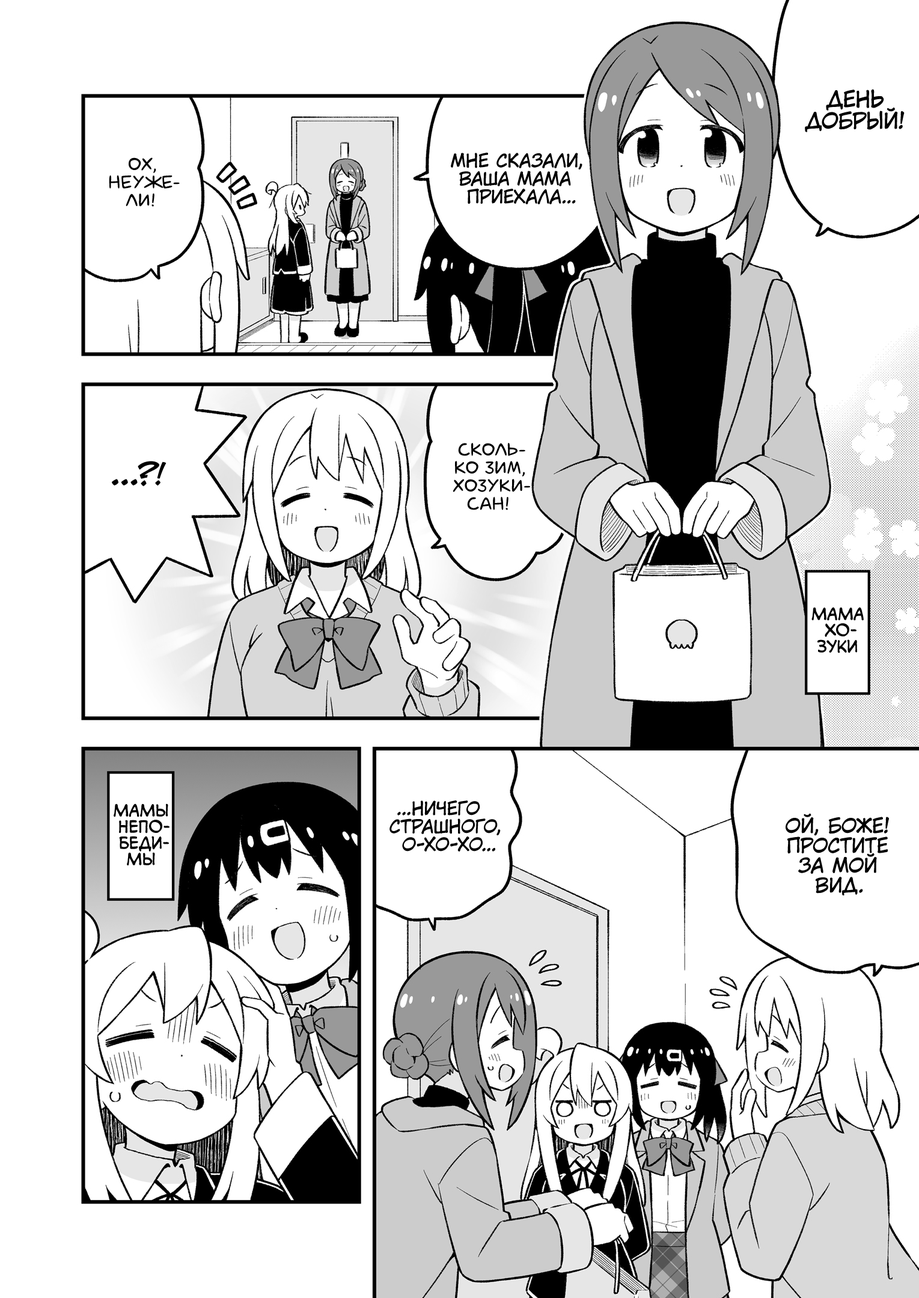
<style>
.page{position:relative;width:919px;height:1298px;background:#ffffff}
.page>*{position:absolute;margin:0}
.t1{font:21.6px "KuraiVoice2";color:#000000;text-transform:uppercase}
.t2{font:18px "laCartoonerie";color:#000000;text-transform:uppercase}
.t3{font:18px "KuraiVoice2";color:#000000;text-transform:uppercase}
.t4{font:28.8px "v_CCJeffCampbell";color:#000000;text-transform:uppercase}
.t5{font:16.2px "v_CCMonologous";color:#000000;text-transform:uppercase}
.t6{font:19.8px "KuraiVoice2";color:#000000;text-transform:uppercase}
</style>
<div class="page">
<p class="t1" style="left:805px;top:89px;width:99px;height:43px;text-align:center">День<br>добрый!</p>
<p class="t2" style="left:109px;top:157px;width:71px;height:50px;text-align:center">Ох,<br>неуже-<br>ли!</p>
<p class="t3" style="left:451px;top:153px;width:131px;height:51px;text-align:center">Мне сказали,<br>ваша мама<br>приехала...</p>
<p class="t2" style="left:452px;top:443px;width:78px;height:67px;text-align:center">Сколь-<br>ко зим,<br>Хозуки-<br>сан!</p>
<p class="t4" style="left:112px;top:461px;width:54px;height:25px">...?!</p>
<p class="t5" style="left:811px;top:607px;width:52px;height:46px;text-align:center">Мама<br>Хо-<br>зуки</p>
<p class="t5" style="left:114px;top:803px;width:55px;height:63px;text-align:center">Мамы<br>непо-<br>беди-<br>мы</p>
<p class="t3" style="left:389px;top:800px;width:112px;height:51px;text-align:center">...Ничего<br>страшного,<br>о-хо-хо...</p>
<p class="t6" style="left:785px;top:813px;width:104px;height:82px;text-align:center">Ой, боже!<br>Простите<br>за мой<br>вид.</p>
</div>
